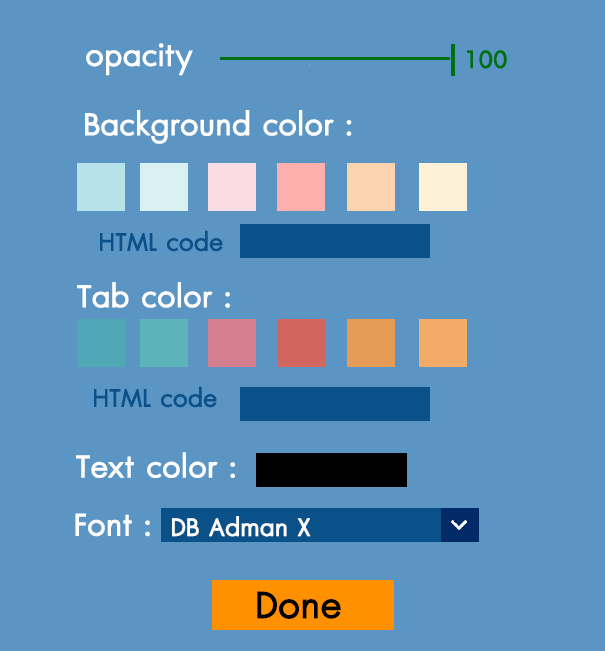
<style>
.page{position:relative;width:605px;height:651px;background:#5b95c3}
.page>*{position:absolute;margin:0}
.t1{font:41.7px "DBAdmanX";color:#ffffff;font-weight:bold}
.t2{font:33.3px "DBAdmanX";color:#007012;font-weight:bold}
.t3{font:33.3px "DBAdmanX";color:#0a5189;font-weight:bold}
.t4{font:33.3px "DBAdmanX";color:#ffffff;font-weight:bold}
.t5{font:50px "DBAdmanX";color:#000000;font-weight:bold}
</style>
<div class="page">
<p class="t1" style="left:86px;top:43px;width:107px;height:33px">opacity</p>
<p class="t2" style="left:467px;top:50px;width:40px;height:19px">100</p>
<p class="t1" style="left:85px;top:110px;width:267px;height:34px">Background color :</p>
<p class="t3" style="left:100px;top:230px;width:123px;height:22px">HTML code</p>
<p class="t1" style="left:77px;top:282px;width:153px;height:26px">Tab color :</p>
<p class="t3" style="left:94px;top:386px;width:123px;height:22px">HTML code</p>
<p class="t1" style="left:76px;top:452px;width:159px;height:26px">Text color :</p>
<p class="t1" style="left:75px;top:513px;width:75px;height:24px">Font :</p>
<p class="t4" style="left:172px;top:516px;width:139px;height:21px">DB Adman X</p>
<p class="t5" style="left:257px;top:591px;width:84px;height:28px">Done</p>
</div>
